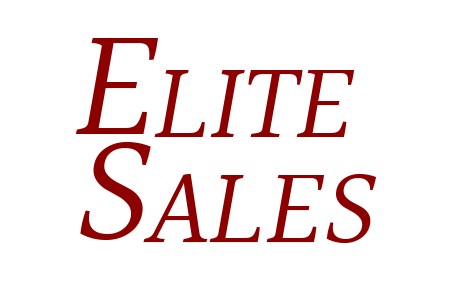
<style>
.page{position:relative;width:450px;height:300px;background:#ffffff}
.page>*{position:absolute;margin:0}
.t1{font:155.6px/105.1px "Halant-Regular";color:#8d0000;font-variant:small-caps;font-style:italic}
</style>
<div class="page">
<p class="t1" style="left:76px;top:38px;width:301px;height:205px">Elite<br>Sales</p>
</div>
